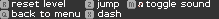
<style>
.page{position:relative;width:219px;height:19px;background:#333333}
.page>*{position:absolute;margin:0}
.t1{font:8px "PFTempestaSeven";color:#ffffff}
</style>
<div class="page">
<p class="t1" style="left:12px;top:0px;width:53px;height:7px">reset level</p>
<p class="t1" style="left:97px;top:0px;width:22px;height:9px">jump</p>
<p class="t1" style="left:146px;top:0px;width:64px;height:9px">toggle sound</p>
<p class="t1" style="left:12px;top:10px;width:68px;height:7px">back to menu</p>
<p class="t1" style="left:98px;top:10px;width:23px;height:7px">dash</p>
</div>
